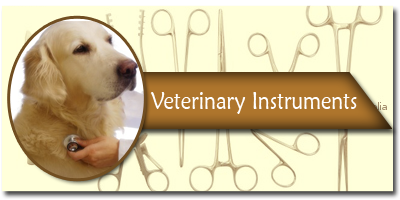
<style>
.page{position:relative;width:400px;height:200px;background:#ffffda}
.page>*{position:absolute;margin:0}
.t1{font:24px "MaiandraGD-Regular";color:#ffffff;scale:0.88 1}
</style>
<div class="page">
<p class="t1" style="left:150px;top:92px;width:207px;height:22px">Veterinary Instruments</p>
</div>
